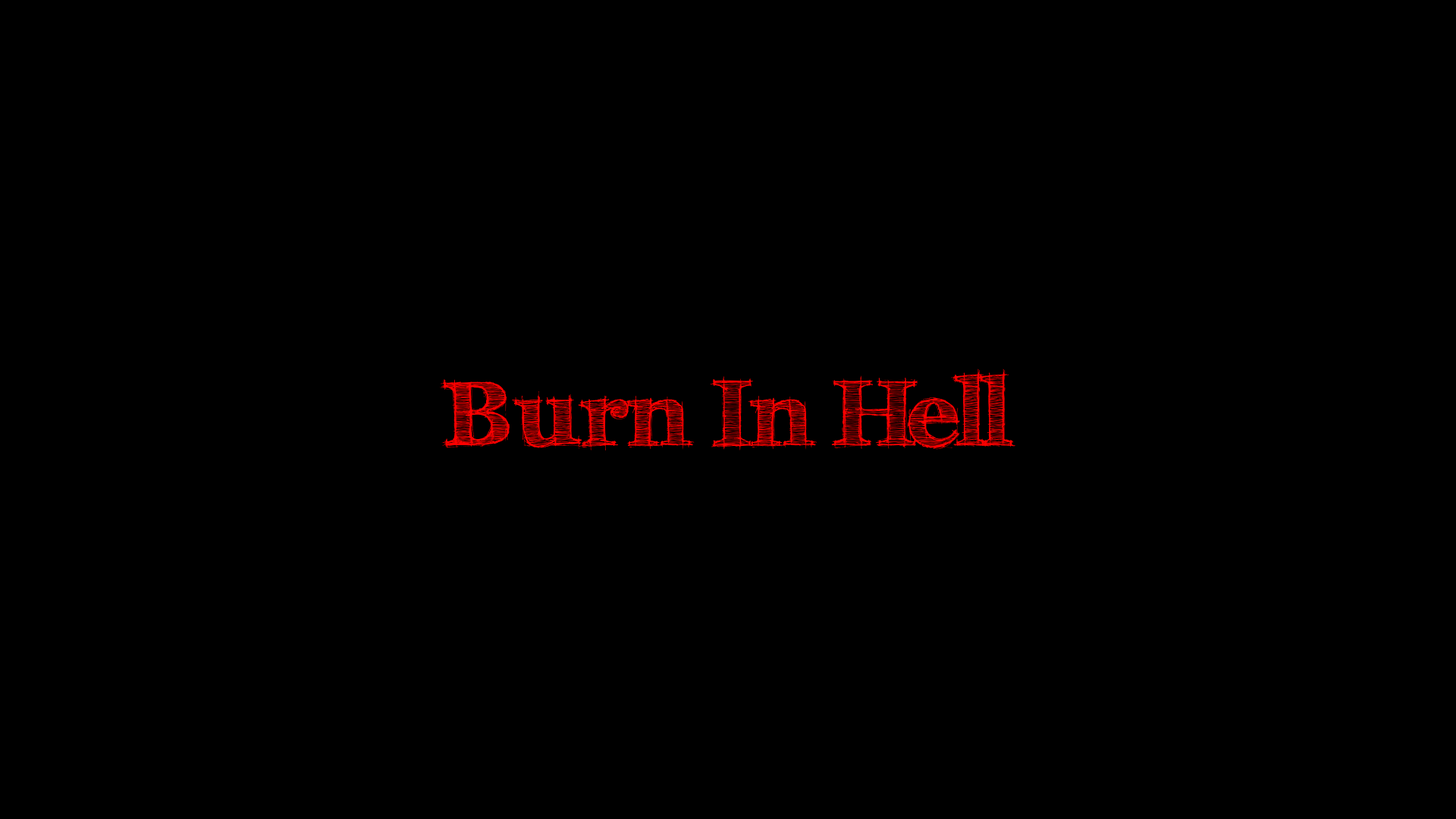
<style>
.page{position:relative;width:1456px;height:819px;background:#000000}
.page>*{position:absolute;margin:0}
.t1{font:93.3px "FFFTusj-Bold";color:#ff0000}
</style>
<div class="page">
<p class="t1" style="left:440px;top:369px;width:576px;height:81px">Burn In Hell</p>
</div>
